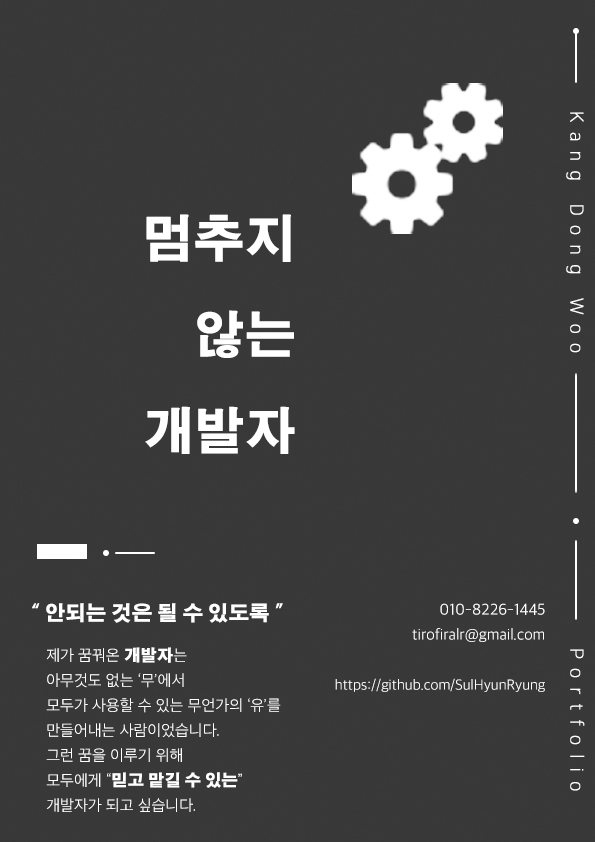
<style>
.page{position:relative;width:595px;height:842px;background:#383838}
.page>*{position:absolute;margin:0}
.t1{font:18px "NanumSquareL";letter-spacing:0.5em;color:#ffffff;font-weight:bold}
.t2{font:50px/96.2px "AdobeGothicStd-Bold";color:#ffffff;font-variant:small-caps;font-weight:bold}
.t3{font:20px "AdobeGothicStd-Bold";color:#ffffff;font-variant:small-caps;font-weight:bold}
.t4{font:16px/25px "AppleSDGothicNeoL00";color:#ffffff}
.t5{font:15px/25px "AppleSDGothicNeoL00";color:#ffffff}
.t6{font:16px/25px "AppleSDGothicNeoL00";color:#ffffff;font-variant:small-caps}
.t7{font:16px/25px "AdobeGothicStd-Bold";color:#ffffff;font-variant:small-caps;font-weight:bold}
</style>
<div class="page">
<p class="t1" style="left:566px;top:112px;width:18px;height:241px;rotate:90deg">Kang Dong Woo</p>
<p class="t2" style="left:145px;top:214px;width:150px;height:240px;text-align:right">멈추지 <br>않는<br>개발자</p>
<p class="t3" style="left:32px;top:603px;width:251px;height:20px">“ 안되는 것은 될 수 있도록 ”</p>
<p class="t4" style="left:335px;top:603px;width:210px;height:89px;text-align:right">010-8226-1445<br>tirofiralr@gmail.com<br><br><span class="t5">https://github.com/SulHyunRyung</span></p>
<p class="t6" style="left:46px;top:647px;width:235px;height:165px">제가 꿈꿔온 <span class="t7">개발자</span>는<br>아무것도 없는 ‘무’에서<br>모두가 사용할 수 있는 무언가의 ‘유’를<br>만들어내는 사람이었습니다.<br>그런 꿈을 이루기 위해<br>모두에게 “<span class="t7">믿고 맡길 수 있는</span>”<br>개발자가 되고 싶습니다.</p>
<p class="t1" style="left:570px;top:649px;width:15px;height:142px;rotate:90deg">Portfolio</p>
</div>
